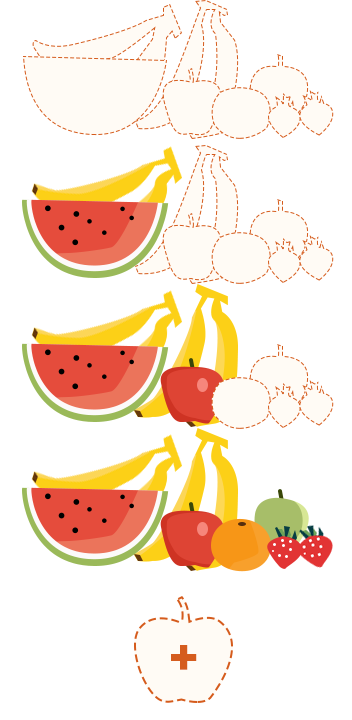
<style>
.page{position:relative;width:352px;height:720px;background:#ffffff}
.page>*{position:absolute;margin:0}
.t1{font:48px "ArialRoundedMTBold";letter-spacing:-0.05em;color:#d55c1e;font-weight:bold}
</style>
<div class="page">
<p class="t1" style="left:171px;top:645px;width:26px;height:25px">+</p>
</div>
